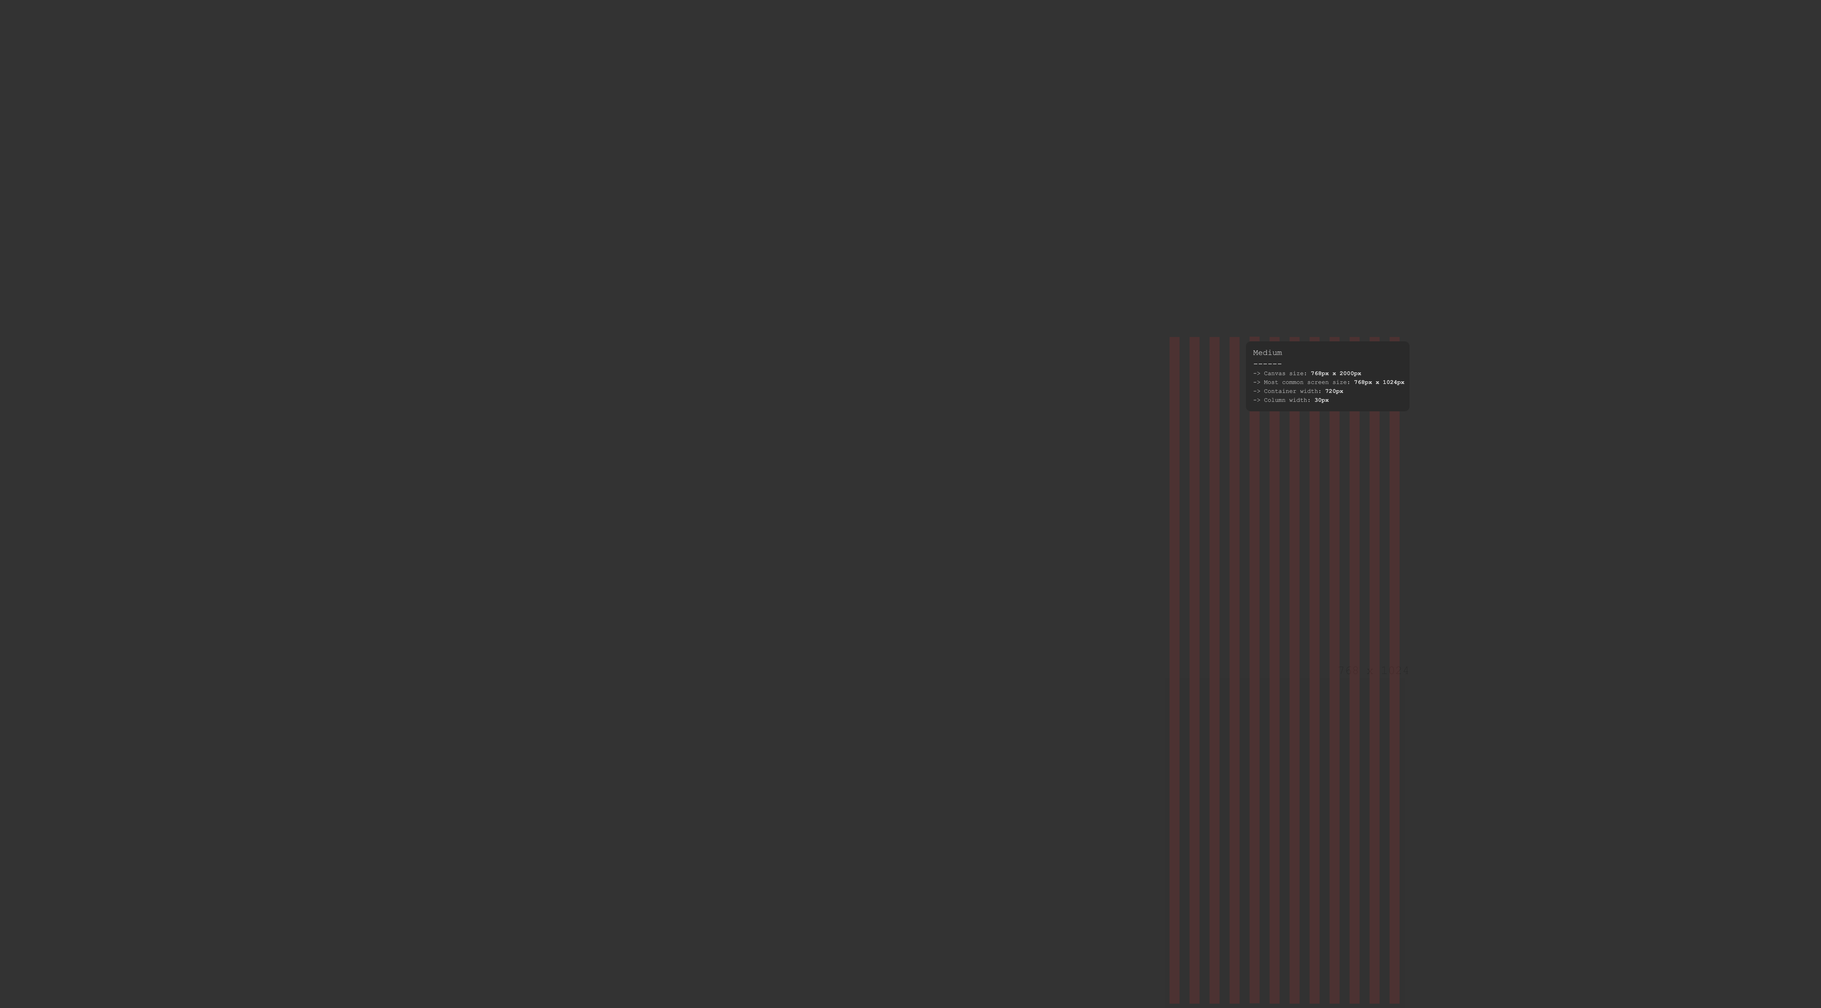
<style>
.page{position:relative;width:1821px;height:1008px;background:#333333}
.page>*{position:absolute;margin:0}
.t1{font:6px "CourierNewPSMT";color:#dedede}
.t2{font:8px "CourierNewPSMT";color:#dedede}
.t3{font:6px "CourierNewPS-BoldMT";color:#dedede}
.t4{font:12px "CourierNewPSMT"}
</style>
<div class="page">
<p class="t1" style="left:1253px;top:350px;width:151px;height:53px"><span class="t2">Medium<br>------<br></span>-&gt; Canvas size: <span class="t3">768px x 2000px<br></span>-&gt; Most common screen size:<span class="t3"> 768px x 1024px<br></span>-&gt; Container width: <span class="t3">720px</span> <br>-&gt; Column width: <span class="t3">30px</span></p>
<p class="t4" style="left:1338px;top:666px;width:70px;height:8px">768 x 1024</p>
</div>
